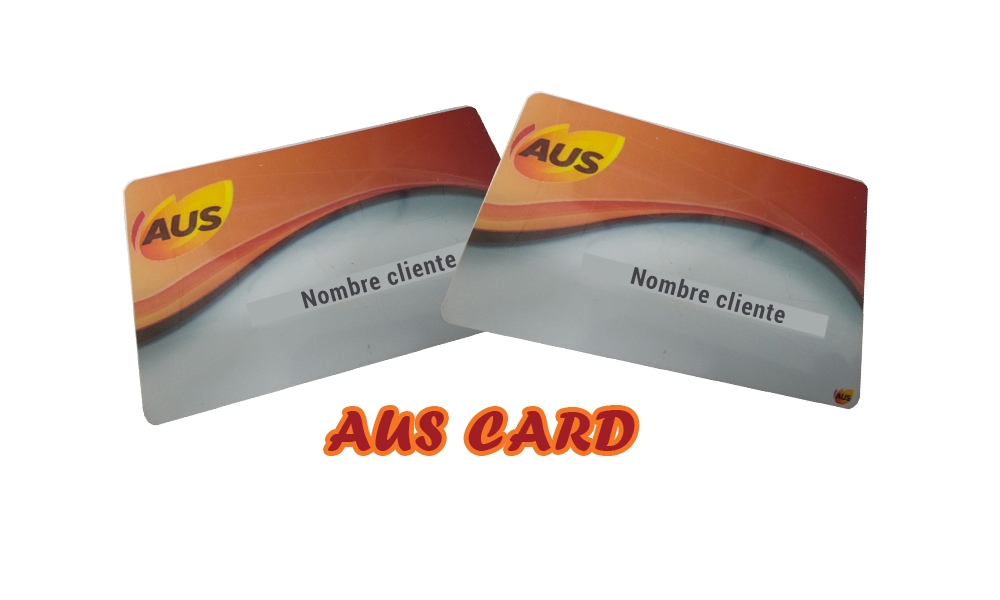
<style>
.page{position:relative;width:1000px;height:600px;background:#ffffff}
.page>*{position:absolute;margin:0}
.t1{font:24px "Roboto-BoldCondensed";letter-spacing:0.05em;color:#424146}
.t2{font:60px "ForteMT";letter-spacing:0.05em;color:#a21e26}
</style>
<div class="page">
<p class="t1" style="left:301px;top:254px;width:156px;height:55px;rotate:-16deg">Nombre cliente</p>
<p class="t1" style="left:630px;top:267px;width:155px;height:56px;rotate:15deg">Nombre cliente</p>
<p class="t2" style="left:328px;top:410px;width:307px;height:41px">AUS CARD</p>
</div>
